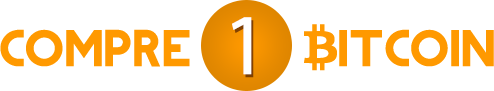
<style>
.page{position:relative;width:494px;height:91px;background:#ffffff}
.page>*{position:absolute;margin:0}
.t1{font:87.5px "MyriadPro-Regular";color:#ffffff}
.t2{font:49.1px "REVOLUTION";color:#ff9900}
</style>
<div class="page">
<p class="t1" style="left:232px;top:17px;width:20px;height:58px">1</p>
<p class="t2" style="left:0px;top:29px;width:190px;height:38px">COMPRE</p>
</div>
